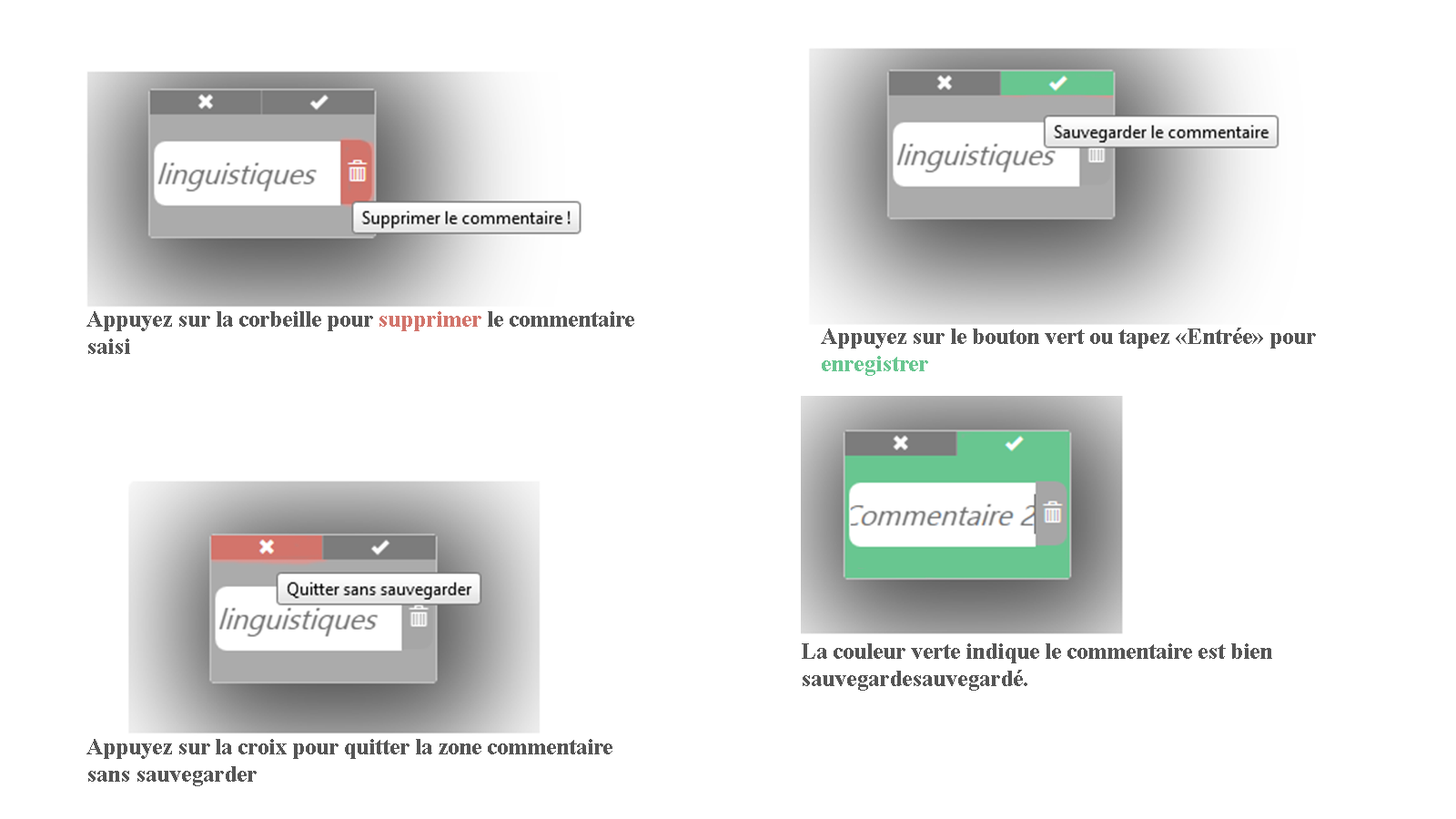
<style>
.page{position:relative;width:1456px;height:819px;background:#ffffff}
.page>*{position:absolute;margin:0}
.t1{font:10.9px "TimesNewRomanPS-BoldMT";color:#555555}
.t2{font:10.9px "TimesNewRomanPS-BoldMT";color:#d2746b}
.t3{font:22.7px "TimesNewRomanPS-BoldMT";color:#555555}
.t4{font:22.7px "TimesNewRomanPS-BoldMT";color:#68c690}
</style>
<div class="page">
<p class="t1" style="left:86px;top:311px;width:548px;height:43px">Appuyez sur la corbeille pour <span class="t2">supprimer </span>le commentaire saisi</p>
<p class="t3" style="left:821px;top:328px;width:495px;height:48px">Appuyez sur le bouton vert ou tapez «Entrée» pour <span class="t4">enregistrer</span></p>
<p class="t1" style="left:802px;top:643px;width:470px;height:48px">La couleur verte indique le commentaire est bien sauvegardesauvegardé.</p>
<p class="t1" style="left:86px;top:739px;width:526px;height:47px">Appuyez sur la croix pour quitter la zone commentaire sans sauvegarder</p>
</div>
